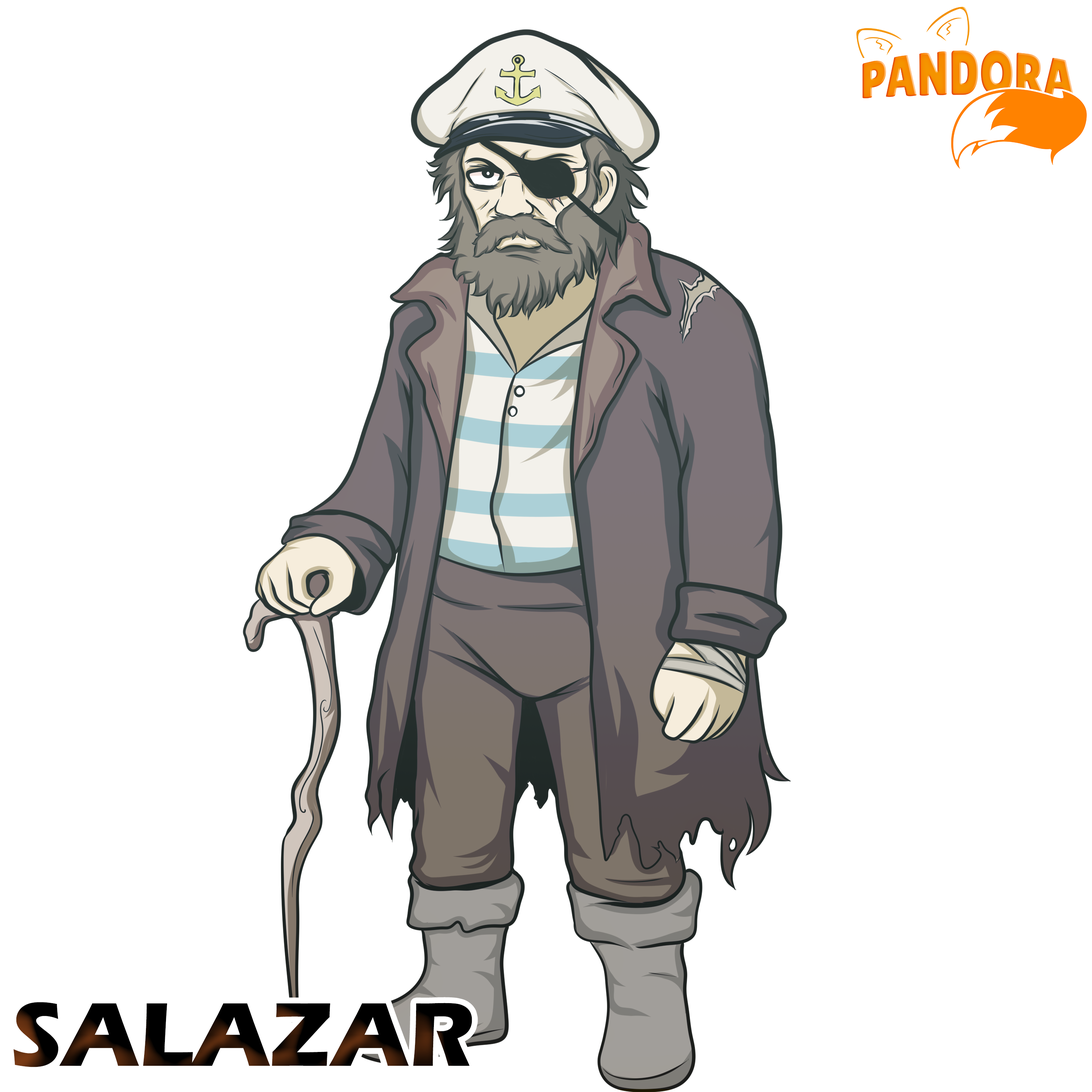
<style>
.page{position:relative;width:1092px;height:1092px;background:#ffffff}
.page>*{position:absolute;margin:0}
.t1{font:93.7px "ErasITC-Bold"}
</style>
<div class="page">
<p class="t1" style="left:13px;top:1002px;width:459px;height:65px">SALAZAR</p>
</div>
